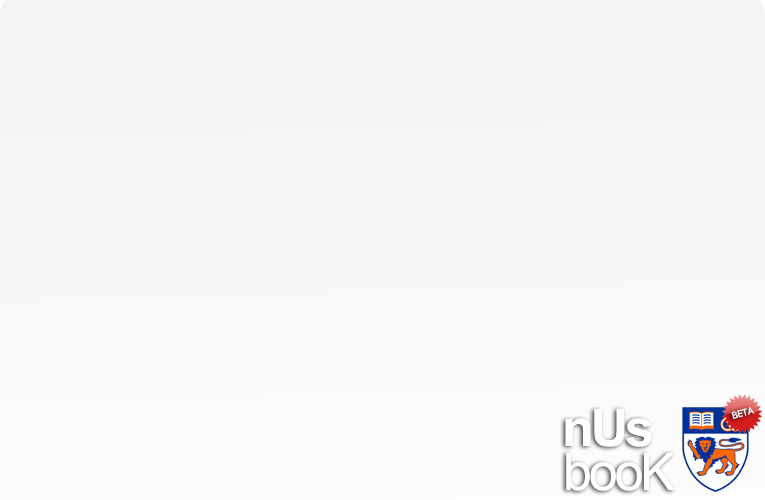
<style>
.page{position:relative;width:765px;height:500px}
.page>*{position:absolute;margin:0}
.t1{font:52px "Arial-BoldMT";letter-spacing:-0.06em;color:#ffffff}
.t2{font:9.7px "Code-Bold";letter-spacing:0.025em;color:#ffffff}
.t3{font:52px "ArialMT";letter-spacing:-0.06em;color:#ffffff}
</style>
<div class="page">
<p class="t1" style="left:565px;top:408px;width:87px;height:39px">nUs</p>
<p class="t2" style="left:731px;top:407px;width:24px;height:12px;rotate:-15deg">BETA</p>
<p class="t3" style="left:566px;top:452px;width:109px;height:39px">booK</p>
</div>
